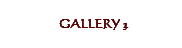
<style>
.page{position:relative;width:182px;height:48px;background:#ffffff}
.page>*{position:absolute;margin:0}
.t1{font:12px "Calligraphic421BT-RomanB";color:#660000;text-transform:uppercase}
</style>
<div class="page">
<p class="t1" style="left:59px;top:19px;width:68px;height:11px">gallery 3</p>
<p class="t1" style="left:59px;top:19px;width:68px;height:11px">gallery 3</p>
<p class="t1" style="left:59px;top:19px;width:70px;height:11px">gallery 2</p>
<p class="t1" style="left:59px;top:19px;width:70px;height:11px">gallery 2</p>
<p class="t1" style="left:59px;top:19px;width:68px;height:11px">gallery 1</p>
<p class="t1" style="left:59px;top:19px;width:68px;height:11px">gallery 1</p>
</div>
